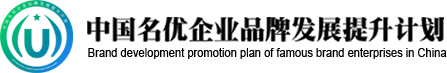
<style>
.page{position:relative;width:447px;height:73px;background:#ffffff}
.page>*{position:absolute;margin:0}
.t1{font:25.8px "¾­µäÌØËÎ¼ò Regular";color:#000000}
.t2{font:11.8px "ArialMT";color:#000000;scale:0.94 1}
</style>
<div class="page">
<p class="t1" style="left:87px;top:17px;width:357px;height:25px">中国名优企业品牌发展提升计划</p>
<p class="t2" style="left:88px;top:48px;width:359px;height:11px">Brand development promotion plan of famous brand enterprises in China</p>
</div>
